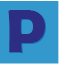
<style>
.page{position:relative;width:59px;height:67px;background:#3399cc}
.page>*{position:absolute;margin:0}
.t1{font:61.6px "BerlinSansFBDemi-Bold";color:#2d2e83}
.t2{font:61.6px "BerlinSansFBDemi-Bold";color:#2c2d83}
</style>
<div class="page">
<p class="t1" style="left:8px;top:10px;width:37px;height:42px">P</p>
<p class="t2" style="left:9px;top:11px;width:37px;height:42px">P</p>
</div>
